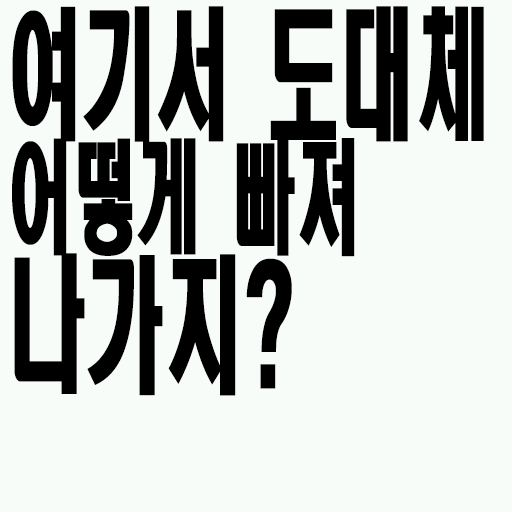
<style>
.page{position:relative;width:512px;height:512px;background:#f8fcf8}
.page>*{position:absolute;margin:0}
.t1{font:140.6px/125px "HeadlineR-HM";color:#000000;scale:0.53 1}
.t2{font:121.6px/125px "HeadlineR-HM";color:#000000;scale:0.53 1}
.t3{font:148.2px/125px "HeadlineR-HM";color:#000000;scale:0.53 1}
</style>
<div class="page">
<p class="t1" style="left:12px;top:6px;width:472px;height:390px">여기서 도대체<br><span class="t2">어떻게 빠져<br></span><span class="t3">나가지?</span></p>
</div>
